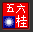
<style>
.page{position:relative;width:33px;height:32px;background:#f20000}
.page>*{position:absolute;margin:0}
.t1{font:10.4px "SimSun";color:#ffffff}
.t2{font:11.7px "SimSun";color:#ffffff}
</style>
<div class="page">
<p class="t1" style="left:7px;top:4px;width:18px;height:9px">五六</p>
<p class="t2" style="left:16px;top:15px;width:11px;height:12px">桂</p>
</div>
